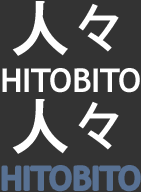
<style>
.page{position:relative;width:141px;height:192px;background:#333333}
.page>*{position:absolute;margin:0}
.t1{font:62px "AdobeGothicStd-Bold";letter-spacing:-0.01em;color:#ffffff}
.t2{font:62px "ArialUnicodeMS";letter-spacing:-0.01em;color:#ffffff}
.t3{font:33px "TrebuchetMS-Bold";letter-spacing:-0.01em;color:#ffffff}
.t4{font:33px "TrebuchetMS-Bold";letter-spacing:-0.01em;color:#587193}
</style>
<div class="page">
<p class="t1" style="left:12px;top:1px;width:107px;height:55px">人<span class="t2">々</span></p>
<p class="t3" style="left:2px;top:68px;width:138px;height:25px">HITOBITO</p>
<p class="t1" style="left:12px;top:99px;width:107px;height:55px">人<span class="t2">々</span></p>
<p class="t4" style="left:2px;top:166px;width:138px;height:25px">HITOBITO</p>
</div>
